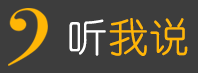
<style>
.page{position:relative;width:198px;height:73px;background:#3d3d3d}
.page>*{position:absolute;margin:0}
.t1{font:40px "YouYuan";color:#ffb606;font-weight:bold}
.t2{font:40px "YouYuan";color:#ffffff;font-weight:bold}
</style>
<div class="page">
<p class="t1" style="left:69px;top:18px;width:119px;height:38px"><span class="t2">听</span>我说</p>
</div>
